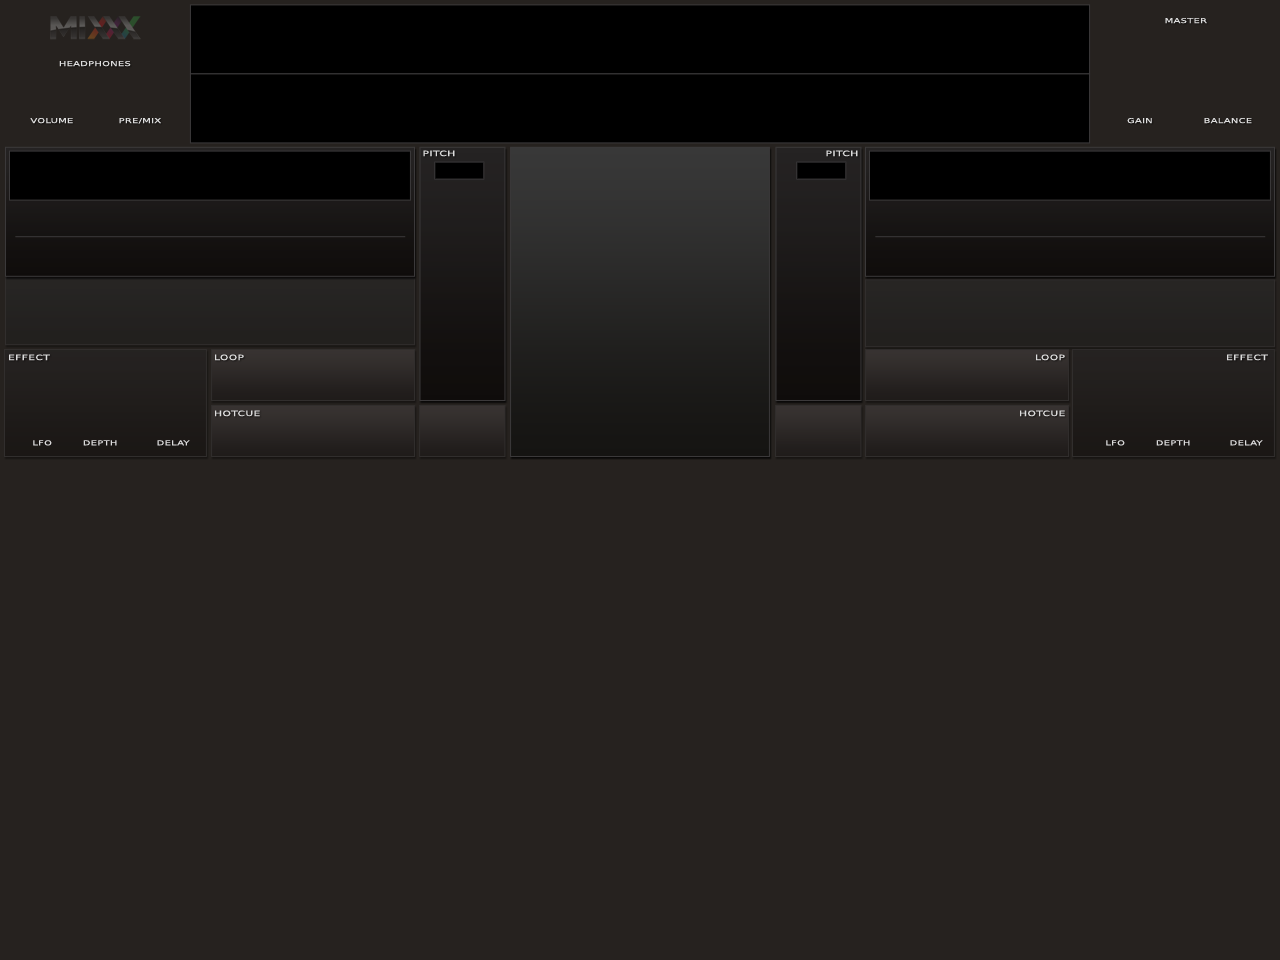
<style>
.page{position:relative;width:1280px;height:960px;background:#26221f}
.page>*{position:absolute;margin:0}
.t1{font:6.6px "DejaVuSansCondensed";color:#dddddd;font-weight:bold;scale:1.67 1}
.t2{font:7.2px "DejaVuSansCondensed";color:#dddddd;font-weight:bold;scale:1.68 1}
.t3{font:7.2px "DejaVuSansCondensed";color:#dddddd;font-weight:bold;scale:1.67 1}
</style>
<div class="page">
<p class="t1" style="left:1165px;top:18px;width:42px;height:6px">MASTER</p>
<p class="t1" style="left:59px;top:61px;width:72px;height:6px">HEADPHONES</p>
<p class="t1" style="left:30px;top:118px;width:43px;height:6px">VOLUME</p>
<p class="t1" style="left:119px;top:118px;width:42px;height:6px">PRE/MIX</p>
<p class="t1" style="left:1127px;top:118px;width:25px;height:6px">GAIN</p>
<p class="t1" style="left:1204px;top:118px;width:48px;height:6px">BALANCE</p>
<p class="t2" style="left:423px;top:150px;width:32px;height:7px">PITCH</p>
<p class="t2" style="left:826px;top:150px;width:32px;height:7px">PITCH</p>
<p class="t3" style="left:9px;top:354px;width:41px;height:7px">EFFECT</p>
<p class="t3" style="left:215px;top:354px;width:29px;height:7px">LOOP</p>
<p class="t3" style="left:1036px;top:354px;width:29px;height:7px">LOOP</p>
<p class="t3" style="left:1227px;top:354px;width:41px;height:7px">EFFECT</p>
<p class="t3" style="left:215px;top:410px;width:45px;height:7px">HOTCUE</p>
<p class="t3" style="left:1020px;top:410px;width:45px;height:7px">HOTCUE</p>
<p class="t1" style="left:33px;top:440px;width:19px;height:6px">LFO</p>
<p class="t1" style="left:83px;top:440px;width:34px;height:6px">DEPTH</p>
<p class="t1" style="left:157px;top:440px;width:33px;height:6px">DELAY</p>
<p class="t1" style="left:1106px;top:440px;width:19px;height:6px">LFO</p>
<p class="t1" style="left:1156px;top:440px;width:34px;height:6px">DEPTH</p>
<p class="t1" style="left:1230px;top:440px;width:33px;height:6px">DELAY</p>
</div>
